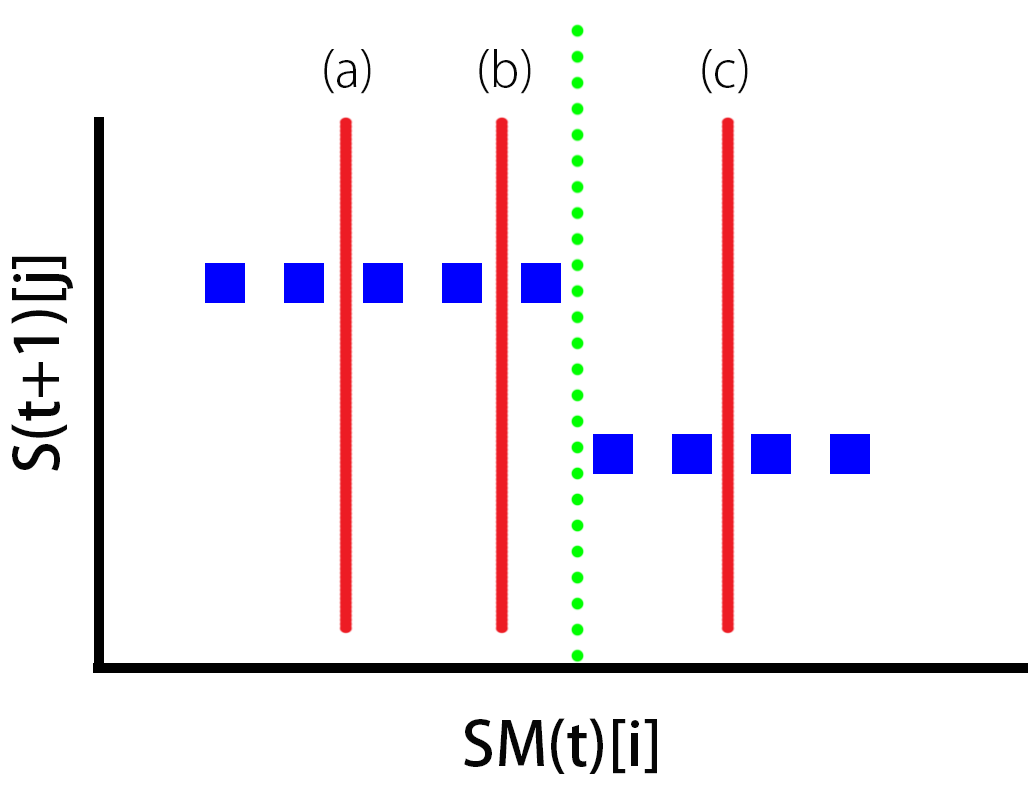
<style>
.page{position:relative;width:1028px;height:793px;background:#ffffff}
.page>*{position:absolute;margin:0}
.t1{font:48px "KozGoPro-Light";color:#060606}
.t2{font:60px "KozGoPro-Medium";color:#060606}
</style>
<div class="page">
<p class="t1" style="left:324px;top:49px;width:47px;height:45px">(a)</p>
<p class="t1" style="left:479px;top:49px;width:52px;height:45px">(b)</p>
<p class="t1" style="left:702px;top:49px;width:46px;height:45px">(c)</p>
<p class="t2" style="left:11px;top:256px;width:62px;height:215px;rotate:-90deg">S(t+1)[j]</p>
<p class="t2" style="left:464px;top:718px;width:193px;height:56px">SM(t)[i]</p>
</div>
